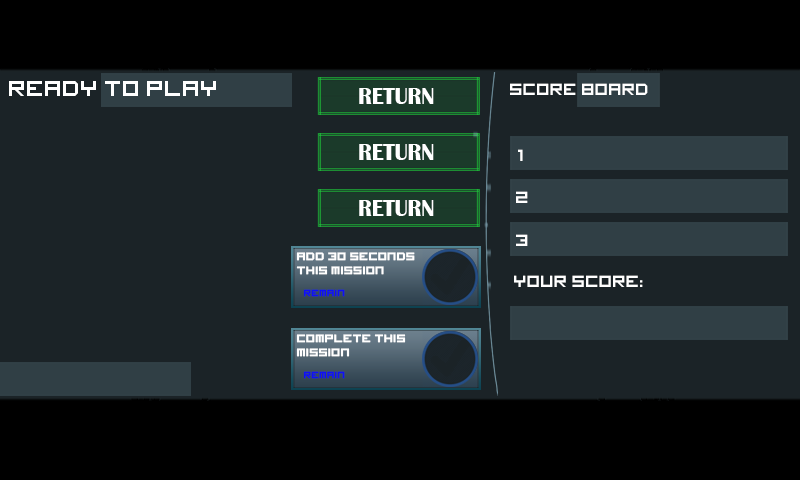
<style>
.page{position:relative;width:800px;height:480px;background:#1b2327}
.page>*{position:absolute;margin:0}
.t1{font:24px "imagine-font";color:#ffffff}
.t2{font:18px "imagine-font";color:#ffffff}
.t3{font:12px "imagine-font";color:#ffffff;font-weight:bold}
.t4{font:10px "imagine-font";color:#0f0ff6;font-weight:bold}
</style>
<div class="page">
<p class="t1" style="left:9px;top:81px;width:207px;height:15px">READY TO PLAY</p>
<p class="t2" style="left:510px;top:83px;width:138px;height:12px">SCORE BOARD</p>
<p class="t2" style="left:518px;top:149px;width:5px;height:12px">1</p>
<p class="t2" style="left:516px;top:191px;width:12px;height:12px">2</p>
<p class="t2" style="left:516px;top:234px;width:12px;height:12px">3</p>
<p class="t3" style="left:296px;top:252px;width:119px;height:23px">add 30 SECONDS<br>this mission</p>
<p class="t2" style="left:514px;top:275px;width:129px;height:12px">YOUR SCORE:</p>
<p class="t4" style="left:303px;top:289px;width:42px;height:8px">remain</p>
<p class="t3" style="left:296px;top:334px;width:110px;height:23px">complete this<br>mission</p>
<p class="t4" style="left:303px;top:371px;width:42px;height:8px">remain</p>
</div>
